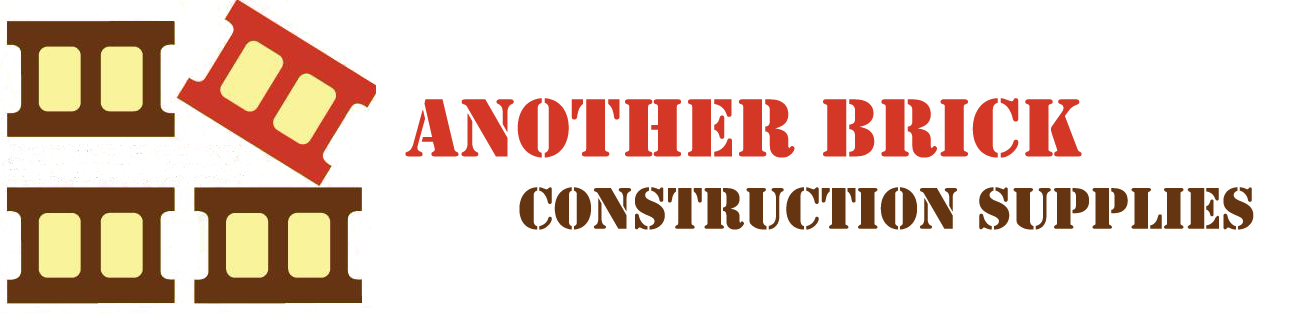
<style>
.page{position:relative;width:1301px;height:313px;background:#ffffff}
.page>*{position:absolute;margin:0}
.t1{font:76px "StencilStd";color:#d43725}
.t2{font:54px "StencilStd";color:#653511}
</style>
<div class="page">
<p class="t1" style="left:405px;top:98px;width:677px;height:60px">Another brick</p>
<p class="t2" style="left:519px;top:187px;width:735px;height:43px">Construction Supplies</p>
</div>
